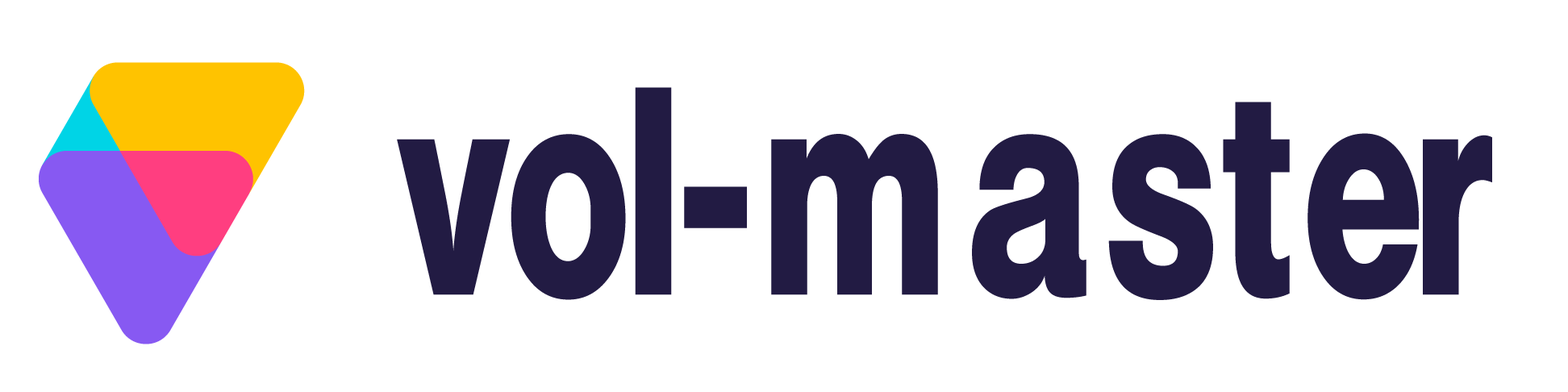
<style>
.page{position:relative;width:1568px;height:392px;background:#ffffff}
.page>*{position:absolute;margin:0}
.t1{font:284.3px "ChoqueDisplaySSi";color:#221b43;font-weight:bold;scale:0.7 1}
</style>
<div class="page">
<p class="t1" style="left:397px;top:87px;width:1095px;height:213px">vol-master</p>
</div>
